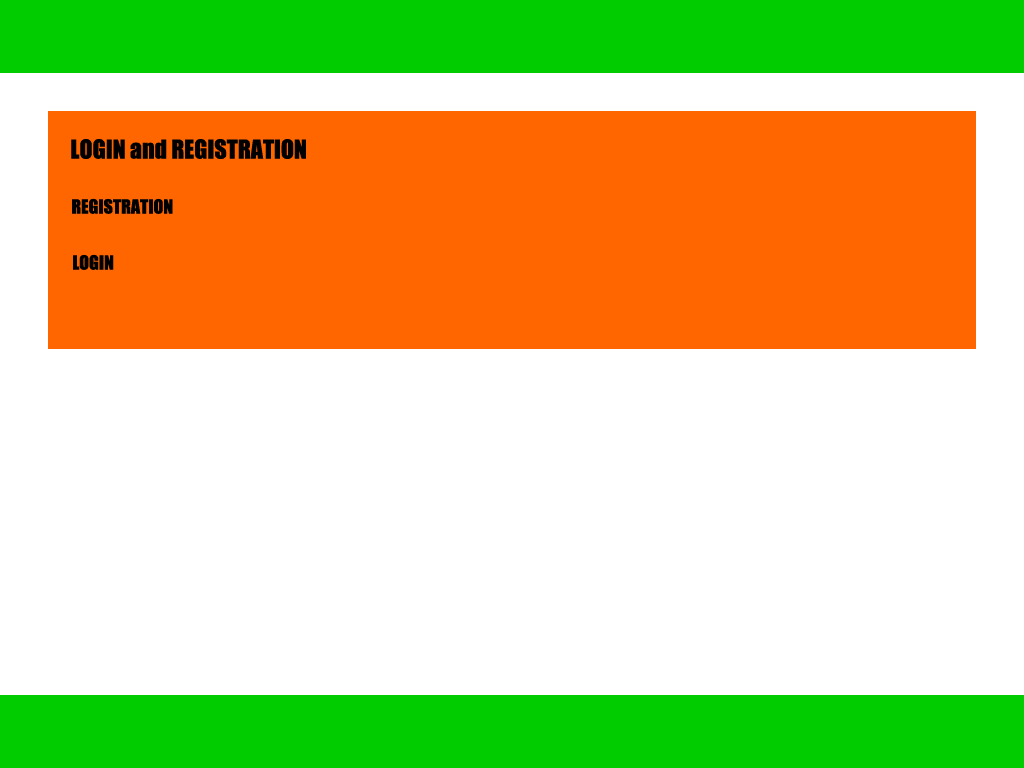
<style>
.page{position:relative;width:1024px;height:768px;background:#ffffff}
.page>*{position:absolute;margin:0}
.t1{font:24px "Impact";color:#000000}
.t2{font:18px "Impact";color:#000000}
</style>
<div class="page">
<p class="t1" style="left:71px;top:139px;width:235px;height:20px">LOGIN and REGISTRATION</p>
<p class="t2" style="left:72px;top:198px;width:101px;height:16px">REGISTRATION</p>
<p class="t2" style="left:73px;top:254px;width:41px;height:16px">LOGIN</p>
</div>
